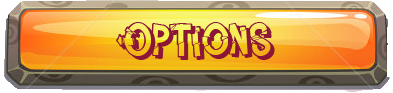
<style>
.page{position:relative;width:393px;height:93px}
.page>*{position:absolute;margin:0}
.t1{font:50px "PeintureFraiche";color:#8b1637}
</style>
<div class="page">
<p class="t1" style="left:116px;top:22px;width:159px;height:38px">Options</p>
</div>
